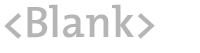
<style>
.page{position:relative;width:200px;height:53px;background:#ffffff}
.page>*{position:absolute;margin:0}
.t1{font:44.1px "TheMixSemiBold-Plain";color:#b6b5b5}
</style>
<div class="page">
<p class="t1" style="left:4px;top:4px;width:151px;height:35px">&lt;Blank&gt;</p>
</div>
